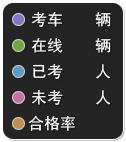
<style>
.page{position:relative;width:126px;height:142px;background:#242424}
.page>*{position:absolute;margin:0}
.t1{font:16px "SimHei";color:#ffffff}
</style>
<div class="page">
<p class="t1" style="left:31px;top:11px;width:80px;height:16px">考车    辆</p>
<p class="t1" style="left:31px;top:38px;width:80px;height:15px">在线    辆</p>
<p class="t1" style="left:33px;top:63px;width:78px;height:16px">已考    人</p>
<p class="t1" style="left:32px;top:89px;width:79px;height:16px">未考    人</p>
<p class="t1" style="left:28px;top:115px;width:47px;height:16px">合格率</p>
</div>
